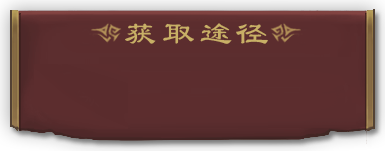
<style>
.page{position:relative;width:385px;height:151px;background:#5c2d2e}
.page>*{position:absolute;margin:0}
.t1{font:32.5px "LiSu";letter-spacing:0.16em;color:#c8b066}
</style>
<div class="page">
<p class="t1" style="left:125px;top:23px;width:143px;height:21px">获取途径</p>
</div>
